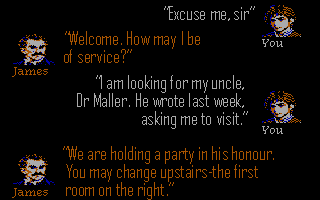
<style>
.page{position:relative;width:320px;height:200px;background:#000000}
.page>*{position:absolute;margin:0}
.t1{font:18px "AgencyFB-Reg";color:#aaaaaa}
.t2{font:18px/18px "AgencyFB-Reg";color:#aa5500}
.t3{font:16px "GloryQuest";color:#aaaaaa}
.t4{font:16px "GloryQuest";color:#aa5500}
.t5{font:18px/18px "AgencyFB-Reg";color:#aaaaaa}
</style>
<div class="page">
<p class="t1" style="left:164px;top:6px;width:91px;height:15px">“Excuse me, sir”</p>
<p class="t2" style="left:64px;top:31px;width:136px;height:32px">“Welcome. How may I be <br>of service?”</p>
<p class="t3" style="left:262px;top:39px;width:21px;height:8px">You</p>
<p class="t4" style="left:12px;top:67px;width:36px;height:10px">James</p>
<p class="t5" style="left:77px;top:75px;width:171px;height:54px;text-align:right">“I am looking for my uncle, <br>Dr Maller. He wrote last week, <br>asking me to visit.”</p>
<p class="t3" style="left:262px;top:126px;width:21px;height:8px">You</p>
<p class="t2" style="left:63px;top:146px;width:211px;height:54px">“We are holding a party in his honour. <br> You may change upstairs-the first <br> room on the right.”</p>
<p class="t4" style="left:12px;top:188px;width:36px;height:10px">James</p>
</div>
